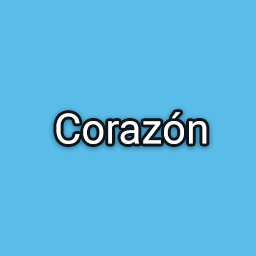
<style>
.page{position:relative;width:256px;height:256px;background:#5abce9}
.page>*{position:absolute;margin:0}
.t1{font:42px "Roboto-Regular";color:#ffffff}
</style>
<div class="page">
<p class="t1" style="left:56px;top:112px;width:151px;height:32px">Corazón</p>
</div>
